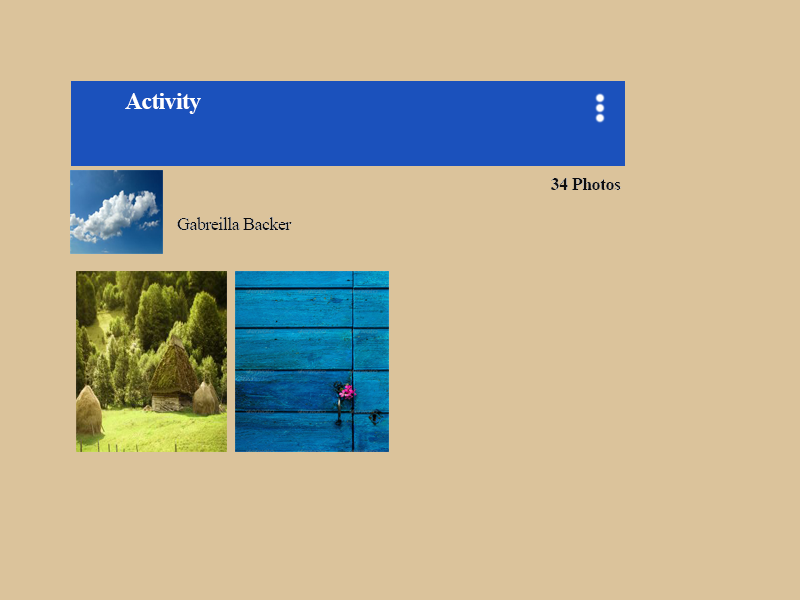
<style>
.page{position:relative;width:800px;height:600px;background:#dbc39b}
.page>*{position:absolute;margin:0}
.t1{font:24px "TimesNewRomanPS-BoldMT";letter-spacing:-0.03em;color:#ffffff}
.t2{font:18px "TimesNewRomanPS-BoldMT";letter-spacing:-0.03em;color:#0e0d0d}
.t3{font:18px "TimesNewRomanPSMT";letter-spacing:-0.03em;color:#0e0d0d}
</style>
<div class="page">
<p class="t1" style="left:125px;top:93px;width:76px;height:21px">Activity</p>
<p class="t2" style="left:551px;top:178px;width:70px;height:12px">34 Photos</p>
<p class="t3" style="left:177px;top:217px;width:115px;height:13px">Gabreilla Backer</p>
</div>
